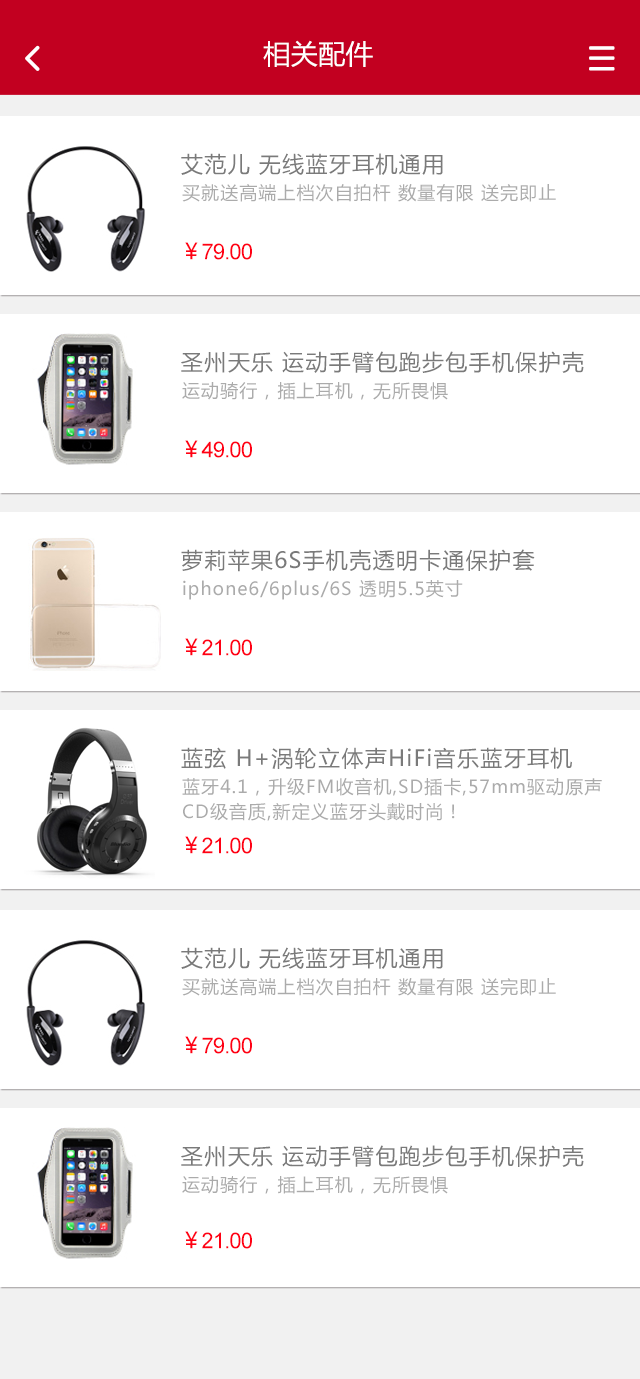
<style>
.page{position:relative;width:640px;height:1379px;background:#ffffff}
.page>*{position:absolute;margin:0}
.t1{font:27.3px "MicrosoftYaHei";color:#ffffff}
.t2{font:22px "MicrosoftYaHei";letter-spacing:0.06em;color:#7a7a7a}
.t3{font:18px "MicrosoftYaHei";letter-spacing:0.06em;color:#ababab}
.t4{font:22px "ArialMT";letter-spacing:-0.04em;color:#ff0014}
.t5{font:22px "MicrosoftYaHei";letter-spacing:-0.04em;color:#ff0014}
.t6{font:18px/25px "MicrosoftYaHei";letter-spacing:0.06em;color:#ababab}
</style>
<div class="page">
<p class="t1" style="left:263px;top:40px;width:110px;height:27px">相关配件</p>
<p class="t2" style="left:181px;top:153px;width:262px;height:22px">艾范儿 无线蓝牙耳机通用</p>
<p class="t3" style="left:182px;top:184px;width:374px;height:18px">买就送高端上档次自拍杆 数量有限 送完即止</p>
<p class="t4" style="left:185px;top:242px;width:67px;height:18px"><span class="t5">￥</span>79.00</p>
<p class="t2" style="left:181px;top:351px;width:403px;height:22px">圣州天乐 运动手臂包跑步包手机保护壳</p>
<p class="t3" style="left:182px;top:382px;width:266px;height:18px">运动骑行，插上耳机，无所畏惧</p>
<p class="t4" style="left:185px;top:440px;width:67px;height:18px"><span class="t5">￥</span>49.00</p>
<p class="t2" style="left:181px;top:549px;width:354px;height:23px">萝莉苹果6S手机壳透明卡通保护套</p>
<p class="t3" style="left:183px;top:580px;width:280px;height:20px">iphone6/6plus/6S 透明5.5英寸</p>
<p class="t4" style="left:185px;top:638px;width:67px;height:18px"><span class="t5">￥</span>21.00</p>
<p class="t2" style="left:181px;top:747px;width:391px;height:22px">蓝弦 H+涡轮立体声HiFi音乐蓝牙耳机</p>
<p class="t6" style="left:182px;top:777px;width:420px;height:44px">蓝牙4.1，升级FM收音机,SD插卡,57mm驱动原声<br>CD级音质,新定义蓝牙头戴时尚！</p>
<p class="t4" style="left:185px;top:836px;width:67px;height:18px"><span class="t5">￥</span>21.00</p>
<p class="t2" style="left:181px;top:947px;width:262px;height:22px">艾范儿 无线蓝牙耳机通用</p>
<p class="t3" style="left:182px;top:978px;width:374px;height:18px">买就送高端上档次自拍杆 数量有限 送完即止</p>
<p class="t4" style="left:185px;top:1036px;width:67px;height:18px"><span class="t5">￥</span>79.00</p>
<p class="t2" style="left:181px;top:1145px;width:403px;height:22px">圣州天乐 运动手臂包跑步包手机保护壳</p>
<p class="t3" style="left:182px;top:1176px;width:266px;height:18px">运动骑行，插上耳机，无所畏惧</p>
<p class="t4" style="left:185px;top:1231px;width:67px;height:18px"><span class="t5">￥</span>21.00</p>
</div>
